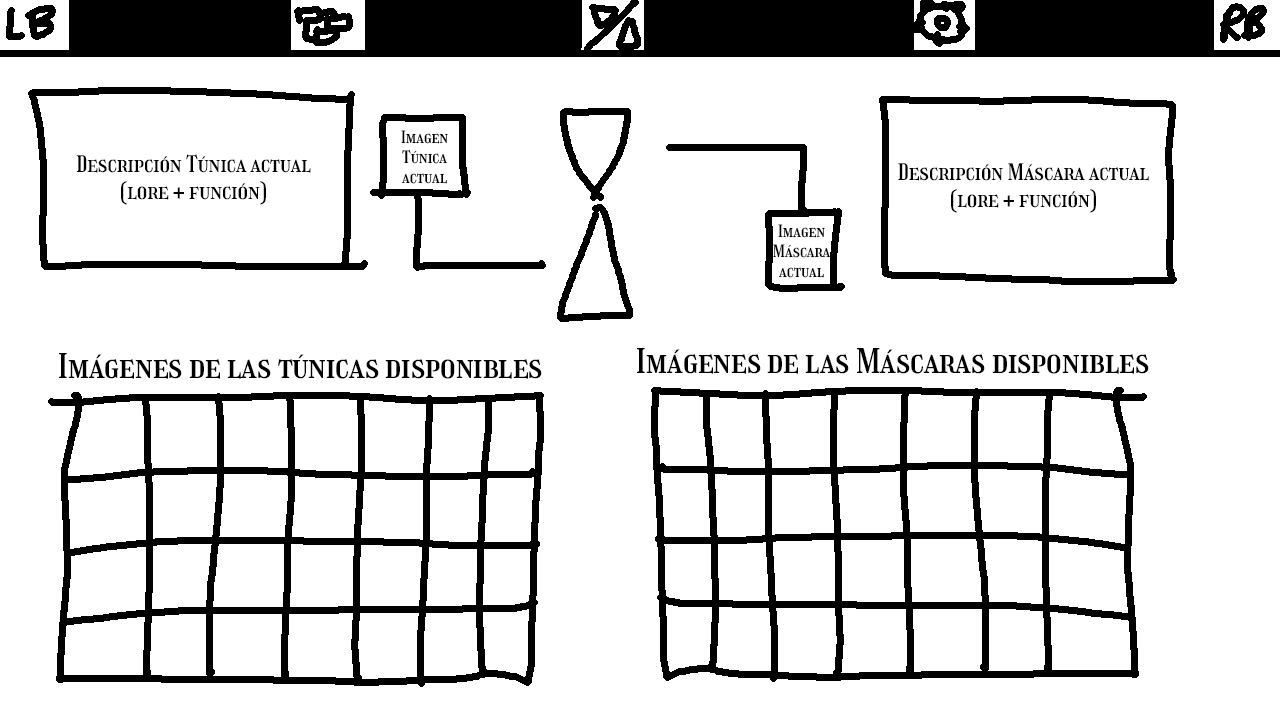
<style>
.page{position:relative;width:1280px;height:720px;background:#ffffff}
.page>*{position:absolute;margin:0}
.t1{font:16.7px "Girassol-Regular";color:#000000}
.t2{font:22.4px "Girassol-Regular";color:#000000}
.t3{font:33.3px "Girassol-Regular";color:#000000}
</style>
<div class="page">
<p class="t1" style="left:401px;top:130px;width:47px;height:54px;text-align:center">Imagen<br>Túnica<br>actual</p>
<p class="t2" style="left:76px;top:154px;width:235px;height:51px;text-align:center">Descripción Túnica actual<br>(lore + función)</p>
<p class="t2" style="left:898px;top:163px;width:251px;height:50px;text-align:center">Descripción Máscara actual<br>(lore + función)</p>
<p class="t1" style="left:773px;top:224px;width:58px;height:54px;text-align:center">Imagen<br>Máscara<br>actual</p>
<p class="t3" style="left:59px;top:353px;width:483px;height:26px">Imágenes de las túnicas disponibles</p>
<p class="t3" style="left:637px;top:348px;width:512px;height:26px">Imágenes de las Máscaras disponibles</p>
</div>
